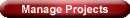
<style>
.page{position:relative;width:130px;height:18px}
.page>*{position:absolute;margin:0}
.t1{font:11px "Arial-BoldMT";color:#ffffff}
</style>
<div class="page">
<p class="t1" style="left:22px;top:5px;width:86px;height:11px">Manage Projects</p>
</div>
